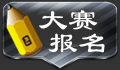
<style>
.page{position:relative;width:120px;height:70px;background:#333333}
.page>*{position:absolute;margin:0}
.t1{font:30px "LiSu";color:#ffffff}
</style>
<div class="page">
<p class="t1" style="left:39px;top:10px;width:59px;height:20px">大赛</p>
<p class="t1" style="left:48px;top:33px;width:57px;height:20px">报名</p>
</div>
